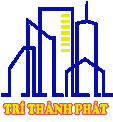
<style>
.page{position:relative;width:113px;height:122px;background:#ffffff}
.page>*{position:absolute;margin:0}
.t1{font:13.3px "CooperBlackStd";color:#e9ec00;scale:0.79 1}
</style>
<div class="page">
<p class="t1" style="left:3px;top:101px;width:105px;height:13px">TRÍ THÀNH PHÁT</p>
</div>
